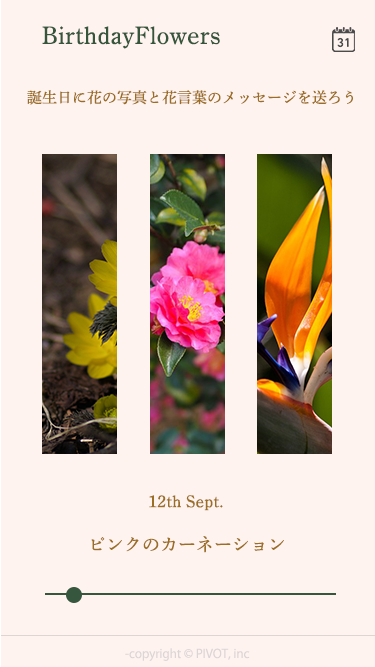
<style>
.page{position:relative;width:375px;height:667px;background:#fff3f0}
.page>*{position:absolute;margin:0}
.t1{font:25px "ShueiMinPro-M";color:#36563c}
.t2{font:15px "ShueiMinPro-M";color:#9b6e23}
.t3{font:17px "ShueiMinPro-M";color:#9b6e23}
.t4{font:18px "ShueiMinPro-M";color:#9b6e23}
.t5{font:12px "KozGoPr6N-Regular";color:#dbd5d5}
</style>
<div class="page">
<p class="t1" style="left:42px;top:26px;width:178px;height:23px">BirthdayFlowers</p>
<p class="t2" style="left:27px;top:90px;width:326px;height:15px">誕生日に花の写真と花言葉のメッセージを送ろう</p>
<p class="t3" style="left:149px;top:495px;width:74px;height:16px">12th Sept.</p>
<p class="t4" style="left:91px;top:536px;width:193px;height:17px">ピンクのカーネーション</p>
<p class="t5" style="left:125px;top:648px;width:125px;height:13px">-copyright © PIVOT, inc</p>
</div>
